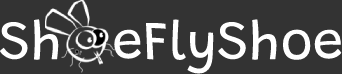
<style>
.page{position:relative;width:342px;height:74px;background:#333333}
.page>*{position:absolute;margin:0}
.t1{font:55px "Grandstander-Regular";color:#ffffff}
</style>
<div class="page">
<p class="t1" style="left:0px;top:19px;width:342px;height:55px">Sh   eFlyShoe</p>
</div>
